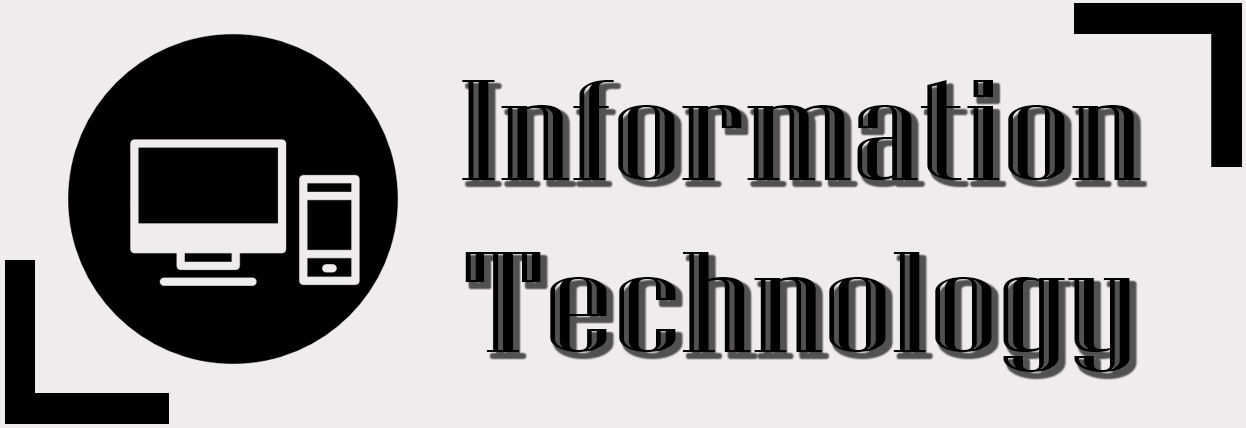
<style>
.page{position:relative;width:1246px;height:428px;background:#eeecec}
.page>*{position:absolute;margin:0}
.t1{font:107.6px "NiagaraEngraved-Reg";color:#000000;scale:1.73 1}
</style>
<div class="page">
<p class="t1" style="left:462px;top:80px;width:678px;height:292px;text-align:center">Information<br>Technology</p>
</div>
